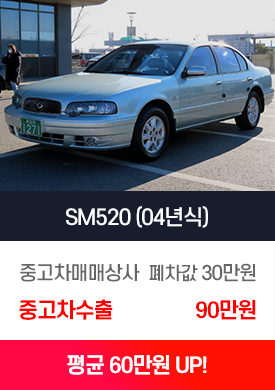
<style>
.page{position:relative;width:275px;height:390px;background:#ffffff}
.page>*{position:absolute;margin:0}
.t1{font:21px "S-CoreDream-5Medium";letter-spacing:-0.06em;color:#ffffff}
.t2{font:19px "S-CoreDream-5Medium";letter-spacing:-0.06em;color:#666666}
.t3{font:18px "S-CoreDream-5Medium";letter-spacing:-0.06em;color:#666666}
.t4{font:21px "S-CoreDream-6Bold";letter-spacing:-0.06em;color:#ff0000}
.t5{font:21px "S-CoreDream-6Bold";letter-spacing:-0.06em;color:#ffffff}
</style>
<div class="page">
<p class="t1" style="left:66px;top:206px;width:142px;height:22px">SM520 (04년식)</p>
<p class="t2" style="left:20px;top:263px;width:120px;height:19px">중고차매매상사</p>
<p class="t2" style="left:149px;top:263px;width:107px;height:19px"><span class="t3">폐차값</span> 30만원</p>
<p class="t4" style="left:19px;top:299px;width:94px;height:21px">중고차수출</p>
<p class="t4" style="left:196px;top:300px;width:60px;height:20px">90만원</p>
<p class="t5" style="left:67px;top:355px;width:140px;height:20px">평균 60만원 UP!</p>
</div>
